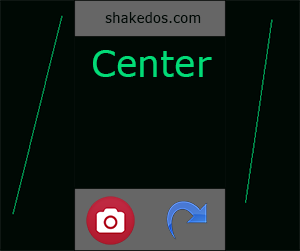
<style>
.page{position:relative;width:300px;height:251px;background:#000904}
.page>*{position:absolute;margin:0}
.t1{font:13.5px "Verdana";color:#000804}
.t2{font:36.1px "Verdana";color:#02db77}
</style>
<div class="page">
<p class="t1" style="left:105px;top:12px;width:96px;height:11px">shakedos.com</p>
<p class="t2" style="left:93px;top:50px;width:119px;height:27px">Center</p>
</div>
